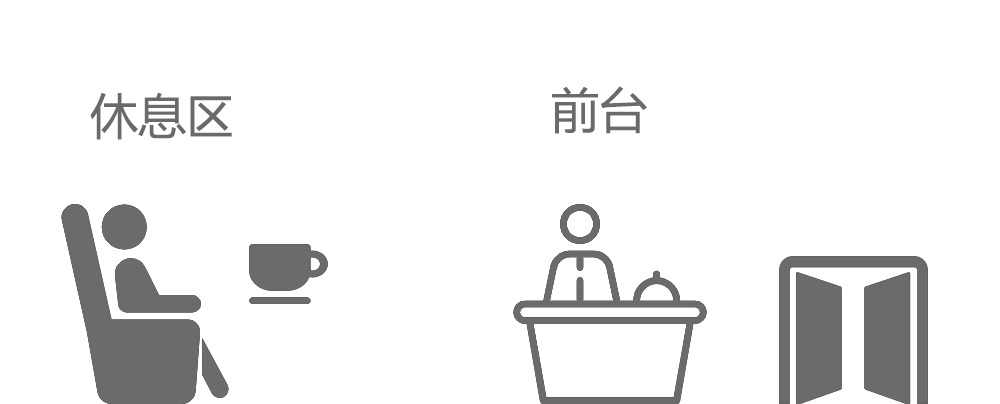
<style>
.page{position:relative;width:1000px;height:404px;background:#ffffff}
.page>*{position:absolute;margin:0}
.t1{font:48px "MicrosoftYaHei";color:#6a6a6a}
</style>
<div class="page">
<p class="t1" style="left:552px;top:86px;width:95px;height:48px">前台</p>
<p class="t1" style="left:90px;top:92px;width:142px;height:48px">休息区</p>
</div>
